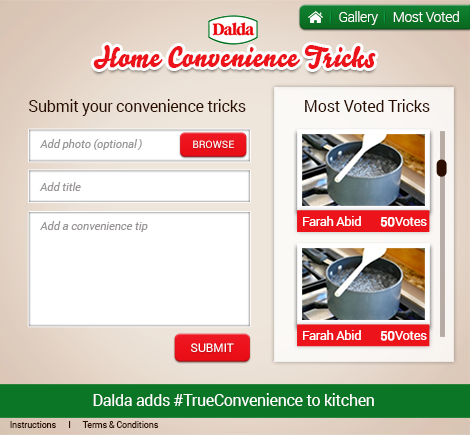
<style>
.page{position:relative;width:470px;height:435px}
.page>*{position:absolute;margin:0}
.t1{font:13.7px "Roboto-Light";letter-spacing:-0.025em;color:#ffffff}
.t2{font:27.8px "Bello-Script";letter-spacing:0.025em;color:#ec131b}
.t3{font:16.3px "Roboto-Regular";letter-spacing:-0.025em;color:#2b0e00}
.t4{font:10.8px "Roboto-Regular";color:#979493;font-style:italic}
.t5{font:10.4px "Roboto-Regular";color:#ffffff;text-transform:uppercase}
.t6{font:12.7px "Roboto-Regular";letter-spacing:-0.025em;color:#ffffff}
.t7{font:12.7px "Roboto-Regular";letter-spacing:-0.025em;color:#ffffff;font-weight:bold}
.t8{font:11.9px "Roboto-Regular";color:#ffffff;text-transform:uppercase}
.t9{font:16.2px "Roboto-Regular";letter-spacing:-0.025em;color:#ffffff}
.t10{font:9.1px "Roboto-Regular";letter-spacing:-0.025em;color:#2b0e00}
</style>
<div class="page">
<p class="t1" style="left:339px;top:11px;width:120px;height:14px">Gallery     Most Voted</p>
<p class="t2" style="left:93px;top:45px;width:283px;height:24px">Home Convenience Tricks</p>
<p class="t3" style="left:29px;top:99px;width:217px;height:17px">Submit your convenience tricks</p>
<p class="t3" style="left:305px;top:99px;width:125px;height:13px">Most Voted Tricks</p>
<p class="t4" style="left:40px;top:139px;width:98px;height:11px">Add photo (optional</p>
<p class="t4" style="left:137px;top:139px;width:5px;height:11px">(</p>
<p class="t5" style="left:193px;top:140px;width:41px;height:8px">browse</p>
<p class="t4" style="left:39px;top:182px;width:42px;height:9px">Add title</p>
<p class="t4" style="left:40px;top:221px;width:108px;height:11px">Add a convenience tip</p>
<p class="t6" style="left:303px;top:216px;width:58px;height:10px">Farah Abid</p>
<p class="t7" style="left:380px;top:217px;width:15px;height:10px">50</p>
<p class="t6" style="left:395px;top:217px;width:32px;height:9px">Votes</p>
<p class="t6" style="left:303px;top:330px;width:58px;height:10px">Farah Abid</p>
<p class="t7" style="left:380px;top:331px;width:15px;height:10px">50</p>
<p class="t6" style="left:395px;top:331px;width:32px;height:9px">Votes</p>
<p class="t8" style="left:191px;top:343px;width:43px;height:9px">submit</p>
<p class="t9" style="left:93px;top:393px;width:281px;height:13px">Dalda adds #TrueConvenience to kitchen</p>
<p class="t10" style="left:10px;top:421px;width:149px;height:7px">Instructions      I      Terms &amp; Conditions</p>
</div>
